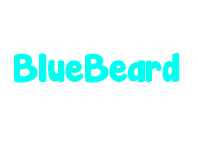
<style>
.page{position:relative;width:198px;height:142px;background:#ffffff}
.page>*{position:absolute;margin:0}
.t1{font:36px "JandaManateeSolid";color:#00fff0}
</style>
<div class="page">
<p class="t1" style="left:14px;top:52px;width:166px;height:31px">BlueBeard</p>
</div>
